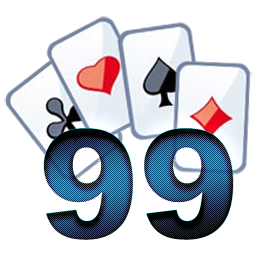
<style>
.page{position:relative;width:256px;height:256px;background:#ffffff}
.page>*{position:absolute;margin:0}
.t1{font:150.3px "Arial-Black"}
</style>
<div class="page">
<p class="t1" style="left:44px;top:128px;width:189px;height:112px">99</p>
</div>
